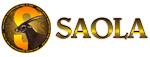
<style>
.page{position:relative;width:150px;height:57px;background:#ffffff}
.page>*{position:absolute;margin:0}
.t1{font:26.7px "UTM-Bienvenue"}
</style>
<div class="page">
<p class="t1" style="left:55px;top:17px;width:93px;height:23px">SAOLA</p>
</div>
